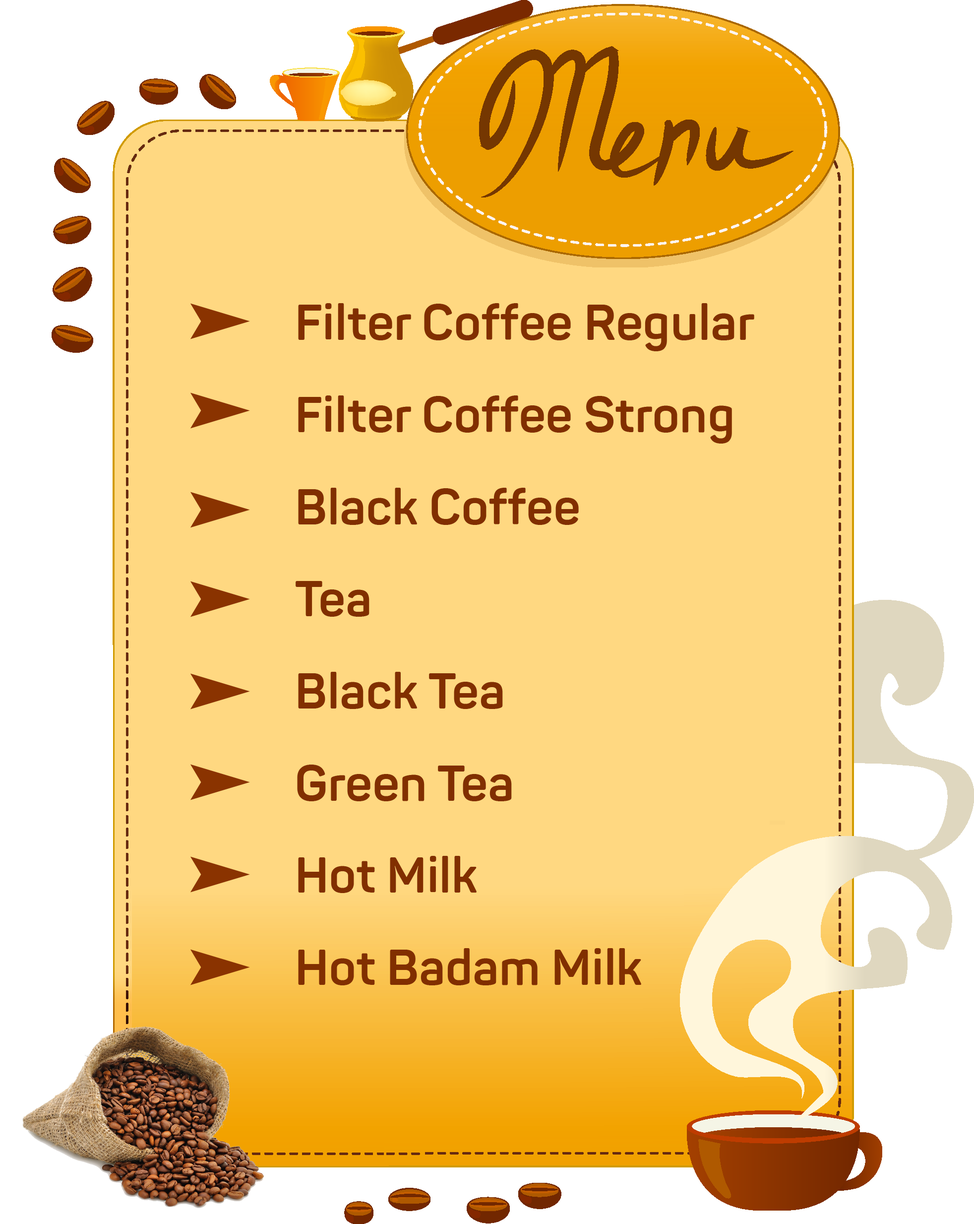
<style>
.page{position:relative;width:974px;height:1224px;background:#ffd881}
.page>*{position:absolute;margin:0}
.t1{font:49.1px/92.1px "Panton-Trial-Bold";color:#812f00}
</style>
<div class="page">
<p class="t1" style="left:296px;top:303px;width:459px;height:682px">Filter Coffee Regular<br>Filter Coffee Strong<br>Black Coffee<br>Tea<br>Black Tea<br>Green Tea<br>Hot Milk<br>Hot Badam Milk</p>
</div>
